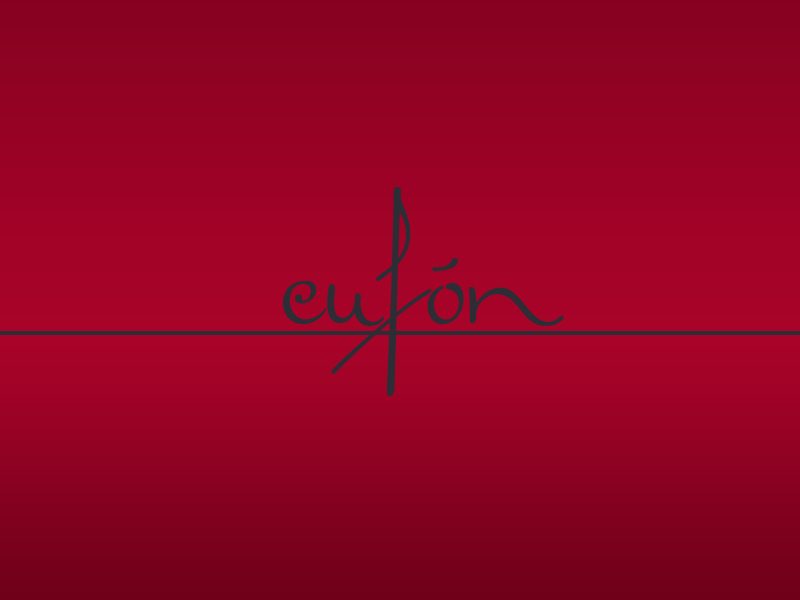
<style>
.page{position:relative;width:800px;height:600px}
.page>*{position:absolute;margin:0}
.t1{font:200px "MissLankfort";color:#2d2e35}
</style>
<div class="page">
<p class="t1" style="left:283px;top:187px;width:281px;height:209px">cufón</p>
</div>
